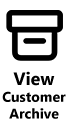
<style>
.page{position:relative;width:68px;height:131px;background:#ffffff}
.page>*{position:absolute;margin:0}
.t1{font:14px "MicrosoftTaiLe-Bold";color:#000000}
.t2{font:18px "MicrosoftTaiLe-Bold";color:#000000}
</style>
<div class="page">
<p class="t1" style="left:2px;top:71px;width:64px;height:48px;text-align:center"><span class="t2">View<br></span>Customer<br>Archive</p>
</div>
